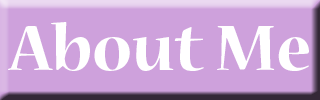
<style>
.page{position:relative;width:320px;height:100px;background:#cea1dc}
.page>*{position:absolute;margin:0}
.t1{font:17px "NuevaStd-Bold";color:#ffffff}
</style>
<div class="page">
<p class="t1" style="left:8px;top:22px;width:301px;height:49px">About Me</p>
</div>
